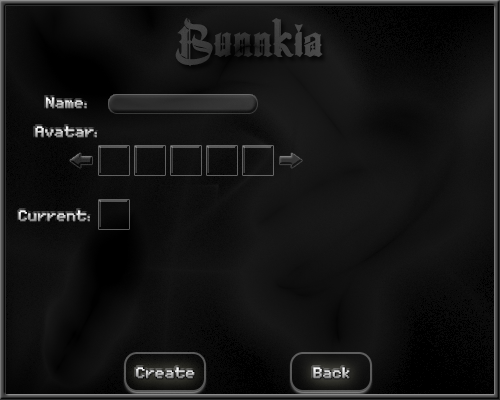
<style>
.page{position:relative;width:500px;height:400px}
.page>*{position:absolute;margin:0}
.t1{font:48px "TheCenturion";color:#3d3d3d;font-weight:bold}
.t2{font:24px "MinimalFont5x7";font-weight:bold}
</style>
<div class="page">
<p class="t1" style="left:175px;top:18px;width:148px;height:49px">Bunnkia</p>
<p class="t2" style="left:46px;top:97px;width:41px;height:12px">Name:</p>
<p class="t2" style="left:35px;top:126px;width:62px;height:12px">Avatar:</p>
<p class="t2" style="left:18px;top:210px;width:72px;height:12px">Current:</p>
<p class="t2" style="left:136px;top:367px;width:59px;height:12px">Create</p>
<p class="t2" style="left:313px;top:367px;width:37px;height:12px">Back</p>
</div>
